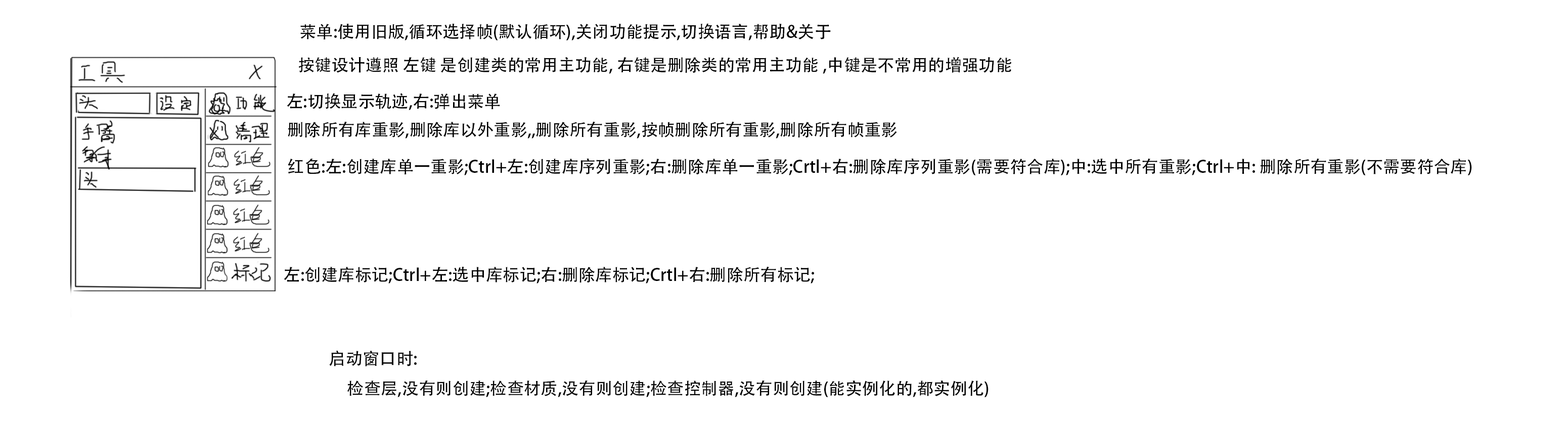
<style>
.page{position:relative;width:1568px;height:423px;background:#ffffff}
.page>*{position:absolute;margin:0}
.t1{font:16.9px "AdobeHeitiStd-Regular";color:#000000}
</style>
<div class="page">
<p class="t1" style="left:300px;top:23px;width:531px;height:17px">菜单:使用旧版,循环选择帧(默认循环),关闭功能提示,切换语言,帮助&amp;关于</p>
<p class="t1" style="left:298px;top:57px;width:714px;height:17px">按键设计遵照 左键 是创建类的常用主功能, 右键是删除类的常用主功能 ,中键是不常用的增强功能</p>
<p class="t1" style="left:287px;top:93px;width:213px;height:17px">左:切换显示轨迹,右:弹出菜单</p>
<p class="t1" style="left:288px;top:121px;width:609px;height:18px">删除所有库重影,删除库以外重影,,删除所有重影,按帧删除所有重影,删除所有帧重影</p>
<p class="t1" style="left:288px;top:158px;width:1184px;height:17px">红色:左:创建库单一重影;Ctrl+左:创建库序列重影;右:删除库单一重影;Crtl+右:删除库序列重影(需要符合库);中:选中所有重影;Ctrl+中: 删除所有重影(不需要符合库)</p>
<p class="t1" style="left:284px;top:266px;width:530px;height:18px">左:创建库标记;Ctrl+左:选中库标记;右:删除库标记;Crtl+右:删除所有标记;</p>
<p class="t1" style="left:329px;top:350px;width:660px;height:47px">启动窗口时:<br> 检查层,没有则创建;检查材质,没有则创建;检查控制器,没有则创建(能实例化的,都实例化)</p>
</div>
